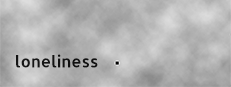
<style>
.page{position:relative;width:231px;height:87px}
.page>*{position:absolute;margin:0}
.t1{font:16px "Allerta-Regular";color:#000000}
</style>
<div class="page">
<p class="t1" style="left:16px;top:54px;width:82px;height:14px;opacity:0.95">loneliness</p>
</div>
